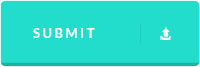
<style>
.page{position:relative;width:200px;height:67px;background:#22ddcc}
.page>*{position:absolute;margin:0}
.t1{font:13px "Lato-Bold";letter-spacing:0.2em;color:#ffffff;text-transform:uppercase}
</style>
<div class="page">
<p class="t1" style="left:33px;top:28px;width:62px;height:10px">Submit</p>
</div>
